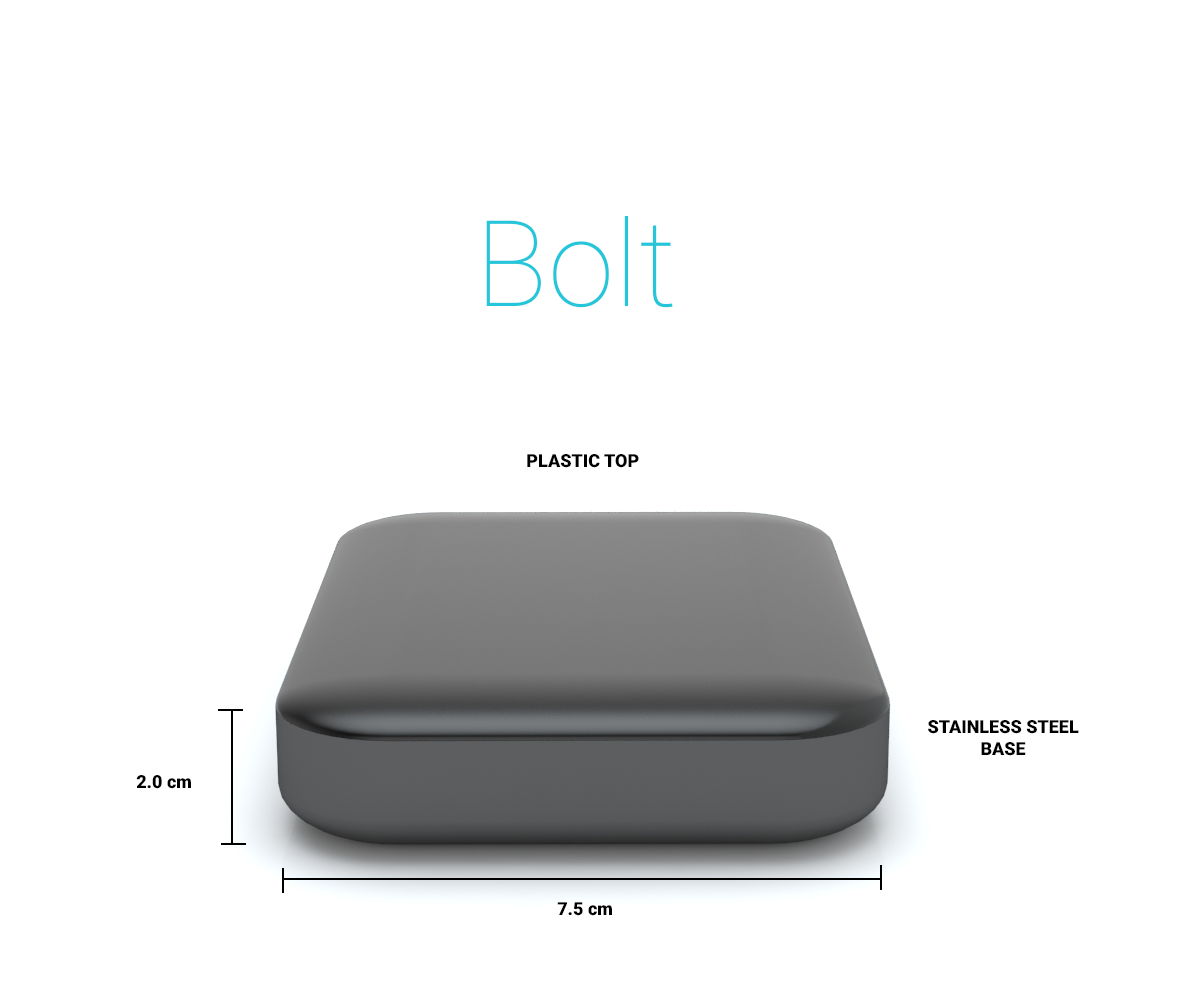
<style>
.page{position:relative;width:1180px;height:1000px;background:#ffffff}
.page>*{position:absolute;margin:0}
.t1{font:120px "Roboto-Thin";color:#26c6da}
.t2{font:18px "Roboto-Black";color:#000000;text-transform:uppercase}
.t3{font:18px "Roboto-Black";color:#000000}
</style>
<div class="page">
<p class="t1" style="left:486px;top:216px;width:187px;height:92px">Bolt</p>
<p class="t2" style="left:527px;top:454px;width:112px;height:14px">Plastic top</p>
<p class="t2" style="left:928px;top:720px;width:151px;height:36px;text-align:center">Stainless steel<br>base</p>
<p class="t3" style="left:136px;top:775px;width:55px;height:14px">2.0 cm</p>
<p class="t3" style="left:557px;top:902px;width:55px;height:14px">7.5 cm</p>
</div>
